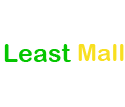
<style>
.page{position:relative;width:125px;height:107px;background:#ffffff}
.page>*{position:absolute;margin:0}
.t1{font:25px "ArialRoundedMTBold";color:#05c601}
.t2{font:24.4px "ArialRoundedMTBold";color:#f8df20}
</style>
<div class="page">
<p class="t1" style="left:4px;top:44px;width:67px;height:18px">Least</p>
<p class="t2" style="left:78px;top:44px;width:46px;height:17px">Mall</p>
</div>
